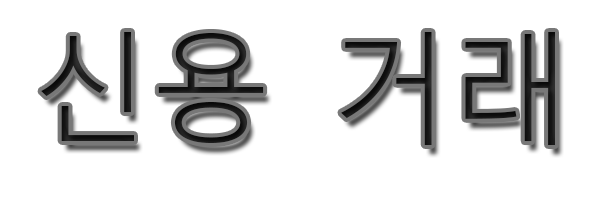
<style>
.page{position:relative;width:600px;height:200px;background:#ffffff}
.page>*{position:absolute;margin:0}
.t1{font:120px "MalgunGothic-Semilight";color:#141414}
</style>
<div class="page">
<p class="t1" style="left:41px;top:32px;width:514px;height:113px">신용 거래</p>
</div>
